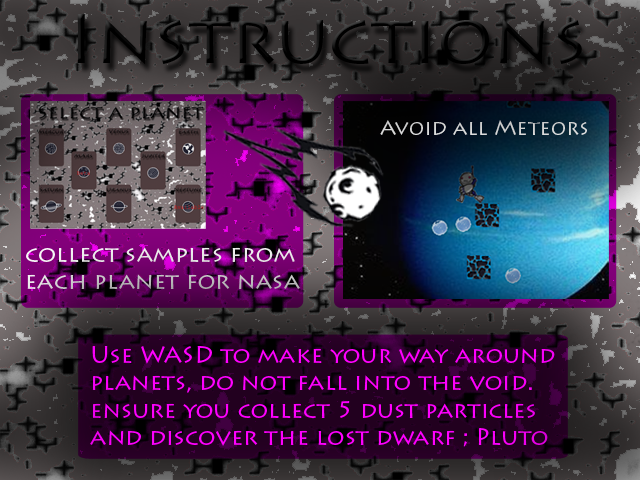
<style>
.page{position:relative;width:640px;height:480px}
.page>*{position:absolute;margin:0}
.t1{font:70.6px "LithosPro-Regular";color:#000000;scale:1.03 1}
.t2{font:20.5px "LithosPro-Regular";color:#d5d5d5}
.t3{font:23px "LithosPro-Regular"}
.t4{font:22.9px "LithosPro-Regular";color:#ff00ff}
</style>
<div class="page">
<p class="t1" style="left:77px;top:14px;width:505px;height:50px">Instructions</p>
<p class="t2" style="left:380px;top:120px;width:207px;height:15px">Avoid all Meteors</p>
<p class="t3" style="left:26px;top:247px;width:274px;height:42px">collect samples from each planet for nasa</p>
<p class="t4" style="left:90px;top:346px;width:465px;height:101px">Use WASD to make your way around<br>planets, do not fall into the void. ensure you collect 5 dust particles<br>and discover the lost dwarf ; Pluto</p>
</div>
